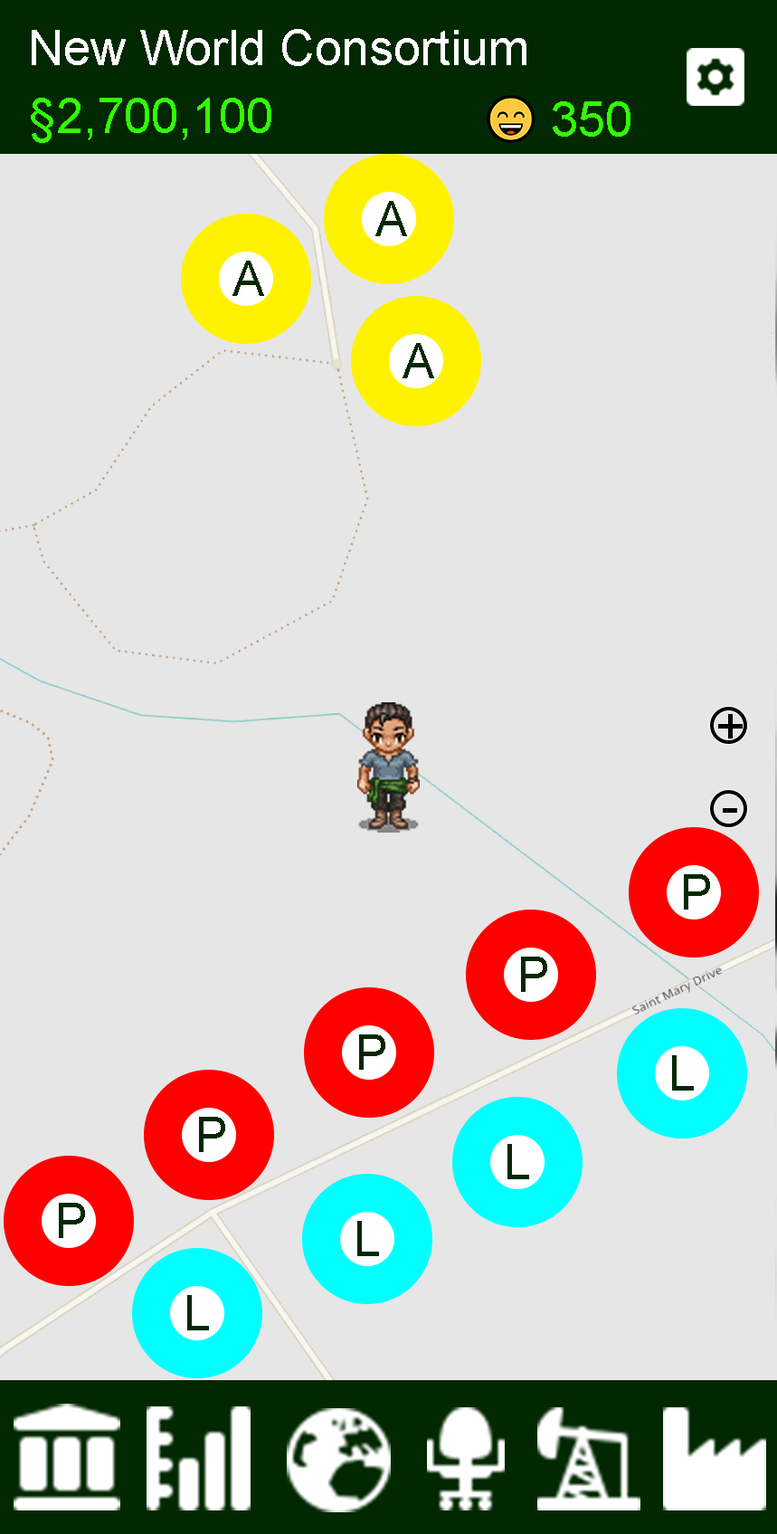
<style>
.page{position:relative;width:777px;height:1534px;background:#e6e6e6}
.page>*{position:absolute;margin:0}
.t1{font:48.9px "ArialMT";color:#ffffff}
.t2{font:48.9px "ArialMT";color:#30ff00}
.t3{font:48.9px "ArialMT";color:#012800}
.t4{font:48.9px "ArialMT";color:#000000}
</style>
<div class="page">
<p class="t1" style="left:32px;top:29px;width:495px;height:37px">New World Consortium</p>
<p class="t2" style="left:31px;top:98px;width:240px;height:45px">§2,700,100</p>
<p class="t2" style="left:553px;top:101px;width:78px;height:36px">350</p>
<p class="t3" style="left:376px;top:201px;width:31px;height:35px">A</p>
<p class="t3" style="left:233px;top:261px;width:31px;height:35px">A</p>
<p class="t3" style="left:403px;top:343px;width:31px;height:35px">A</p>
<p class="t4" style="left:719px;top:714px;width:24px;height:24px">+</p>
<p class="t3" style="left:684px;top:874px;width:26px;height:35px">P</p>
<p class="t3" style="left:521px;top:957px;width:27px;height:35px">P</p>
<p class="t3" style="left:359px;top:1034px;width:27px;height:36px">P</p>
<p class="t3" style="left:672px;top:1055px;width:22px;height:35px">L</p>
<p class="t3" style="left:199px;top:1117px;width:26px;height:35px">P</p>
<p class="t3" style="left:508px;top:1144px;width:21px;height:35px">L</p>
<p class="t3" style="left:59px;top:1203px;width:26px;height:35px">P</p>
<p class="t3" style="left:357px;top:1221px;width:22px;height:35px">L</p>
<p class="t3" style="left:187px;top:1295px;width:22px;height:35px">L</p>
</div>
